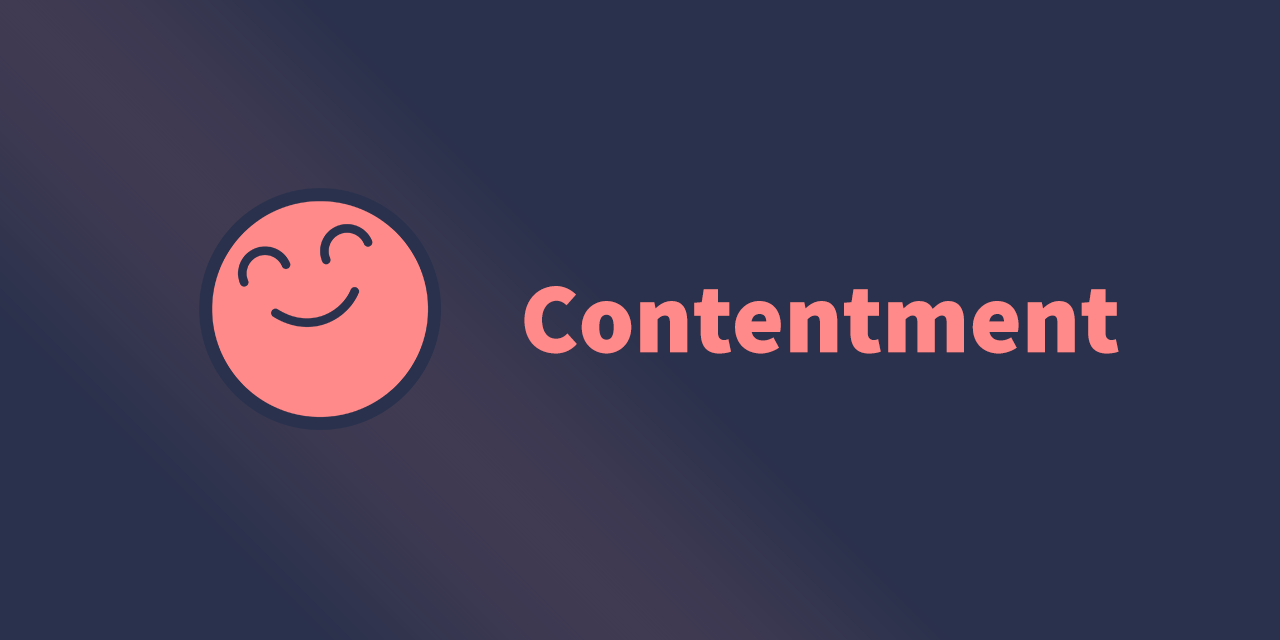
<style>
.page{position:relative;width:1280px;height:640px;background:#2a314c}
.page>*{position:absolute;margin:0}
.t1{font:100px "SourceSansPro-Black";color:#ff8a89}
</style>
<div class="page">
<p class="t1" style="left:524px;top:286px;width:595px;height:68px">Contentment</p>
</div>
